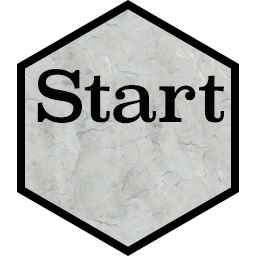
<style>
.page{position:relative;width:256px;height:256px;background:#ffffff}
.page>*{position:absolute;margin:0}
.t1{font:70px "Superclarendon-Regular";letter-spacing:-0.025em;color:#030303}
</style>
<div class="page">
<p class="t1" style="left:37px;top:69px;width:187px;height:55px">Start</p>
</div>
